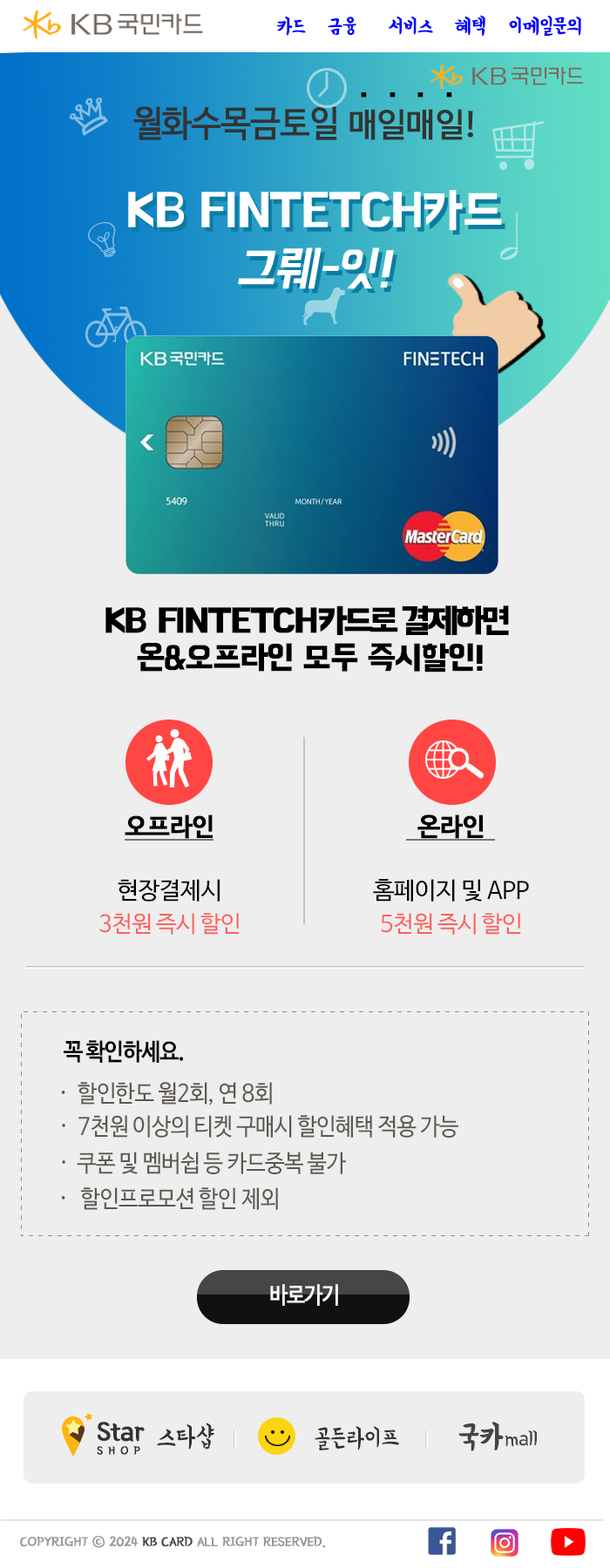
<style>
.page{position:relative;width:610px;height:1568px;background:#eeeeee}
.page>*{position:absolute;margin:0}
.t1{font:20.9px "BMYEONSUNG";letter-spacing:-0.025em;color:#0000ff;font-weight:bold}
.t2{font:45.4px "BMHANNAPro";letter-spacing:-0.145em;color:#000000}
.t3{font:45.4px "BMHANNAPro";letter-spacing:-0.125em;color:#000000}
.t4{font:36.3px "NanumBarunGothic";letter-spacing:-0.025em;color:#323433;font-weight:bold;scale:0.91 1}
.t5{font:33px "NanumBarunGothic";letter-spacing:-0.045em;color:#323433;font-weight:bold}
.t6{font:33px "BMHANNAPro";letter-spacing:-0.05em;color:#000000;font-weight:bold}
.t7{font:34.5px "BMHANNAPro";letter-spacing:-0.05em;color:#000000;font-weight:bold}
.t8{font:34.5px "BMHANNAPro";letter-spacing:-0.13em;color:#000000;font-weight:bold}
.t9{font:23px/33.4px "NanumBarunGothic";letter-spacing:-0.025em;color:#fc615d}
.t10{font:25.1px "NanumBarunGothicBold";letter-spacing:-0.025em;color:#000000;font-weight:bold}
.t11{font:24px/33.4px "NanumBarunGothic";letter-spacing:-0.025em;color:#000000}
.t12{font:24px/36px "NanumBarunGothic";letter-spacing:-0.025em;color:#5c584f;scale:0.91 1}
.t13{font:24px/34.9px "NanumBarunGothicBold";letter-spacing:-0.05em;color:#000000;scale:0.91 1}
.t14{font:24px/29.4px "NanumBarunGothic";letter-spacing:-0.025em;color:#5c584f;scale:0.91 1}
.t15{font:24px/33.8px "NanumBarunGothic";letter-spacing:-0.025em;color:#5c584f;scale:0.91 1}
.t16{font:23.1px "NanumBarunGothic";letter-spacing:-0.045em;color:#ffffff;font-weight:bold;scale:0.86 1}
.t17{font:27.8px "BMYEONSUNG";letter-spacing:-0.025em;color:#323232;font-weight:bold}
.t18{font:12.1px "BMYEONSUNG";letter-spacing:0.435em;color:#323232;font-weight:bold}
.t19{font:21px "BMYEONSUNG";letter-spacing:-0.025em;color:#444444}
.t20{font:31.5px "BMYEONSUNG";letter-spacing:-0.025em;color:#444444;font-weight:bold}
.t21{font:28px "BMYEONSUNG";letter-spacing:-0.025em;color:#323232;scale:0.96 1}
.t22{font:26.5px "BMYEONSUNG";letter-spacing:-0.025em;color:#333333}
.t23{font:13.6px "BMYEONSUNG";letter-spacing:-0.025em;color:#989898;font-weight:bold;scale:1.05 1}
.t24{font:13.6px "BMYEONSUNG";letter-spacing:-0.025em;color:#444444;font-weight:bold;scale:1.05 1}
</style>
<div class="page">
<p class="t1" style="left:276px;top:15px;width:305px;height:22px">카드   금융     서비스   혜택   이메일문의</p>
<p class="t2" style="left:361px;top:92px;width:91px;height:6px"><span class="t3">.</span>   .   .   .</p>
<p class="t4" style="left:133px;top:106px;width:340px;height:35px">월화수목금토일 <span class="t5">매일매일!</span></p>
<p class="t6" style="left:105px;top:605px;width:404px;height:67px;text-align:center"><span class="t7">KB FINTETCH</span><span class="t8">카드로 결제하면 <br></span>온&amp;오프라인 모두 즉시할인!</p>
<p class="t9" style="left:99px;top:814px;width:141px;height:121px;text-align:center"><span class="t10">오프라인<br><br></span><span class="t11">현장결제시<br></span>3천원 즉시 할인</p>
<p class="t11" style="left:373px;top:814px;width:156px;height:121px;text-align:center"><span class="t10">온라인<br><br></span>홈페이지 및 APP<br><span class="t9">5천원 즉시 할인</span></p>
<p class="t12" style="left:61px;top:1040px;width:397px;height:170px"><span class="t13">꼭 확인하세요.<br></span><span class="t14">·   할인한도 월2회, 연 8회<br></span><span class="t15">·  7천원 이상의 티켓 구매시 할인혜택 적용 가능<br></span><span class="t14">·  </span>쿠폰 및 멤버쉽 등 카드중복 불가<br>·   할인프로모션 할인 제외</p>
<p class="t16" style="left:270px;top:1284px;width:68px;height:22px">바로가기</p>
<p class="t17" style="left:97px;top:1422px;width:48px;height:33px">Star<br><span class="t18">SHOP</span></p>
<p class="t19" style="left:458px;top:1422px;width:79px;height:29px"><span class="t20">국카</span>mall</p>
<p class="t21" style="left:157px;top:1423px;width:57px;height:27px">스타샵</p>
<p class="t22" style="left:314px;top:1426px;width:85px;height:24px">골든라이프</p>
<p class="t23" style="left:20px;top:1536px;width:305px;height:12px">COPYRIGHT ⓒ 2024 <span class="t24">KB CARD </span>ALL RIGHT RESERVED.</p>
</div>
